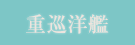
<style>
.page{position:relative;width:135px;height:45px;background:#7dc6c6}
.page>*{position:absolute;margin:0}
.t1{font:21px "RyuminPro-Medium";color:#f4e6df}
</style>
<div class="page">
<p class="t1" style="left:26px;top:14px;width:83px;height:20px">重巡洋艦</p>
</div>
